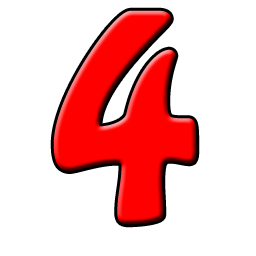
<style>
.page{position:relative;width:256px;height:256px;background:#ffffff}
.page>*{position:absolute;margin:0}
.t1{font:250px "HoboStd";color:#ff0000;font-weight:bold}
</style>
<div class="page">
<p class="t1" style="left:53px;top:10px;width:144px;height:215px">4</p>
</div>
